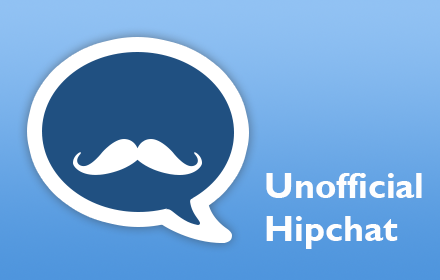
<style>
.page{position:relative;width:440px;height:280px}
.page>*{position:absolute;margin:0}
.t1{font:36px "GillSansMT-Bold";color:#fefefe}
</style>
<div class="page">
<p class="t1" style="left:266px;top:173px;width:156px;height:76px">Unofficial<br>Hipchat</p>
</div>
